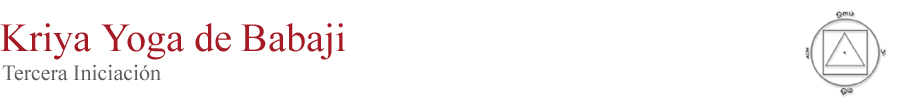
<style>
.page{position:relative;width:922px;height:101px;background:#ffffff}
.page>*{position:absolute;margin:0}
.t1{font:40px "TimesNewRomanPSMT";color:#a51a24}
.t2{font:22px "TimesNewRomanPSMT";color:#615c5c}
</style>
<div class="page">
<p class="t1" style="left:0px;top:23px;width:346px;height:37px">Kriya Yoga de Babaji</p>
<p class="t2" style="left:2px;top:64px;width:159px;height:17px">Tercera Iniciación</p>
</div>
